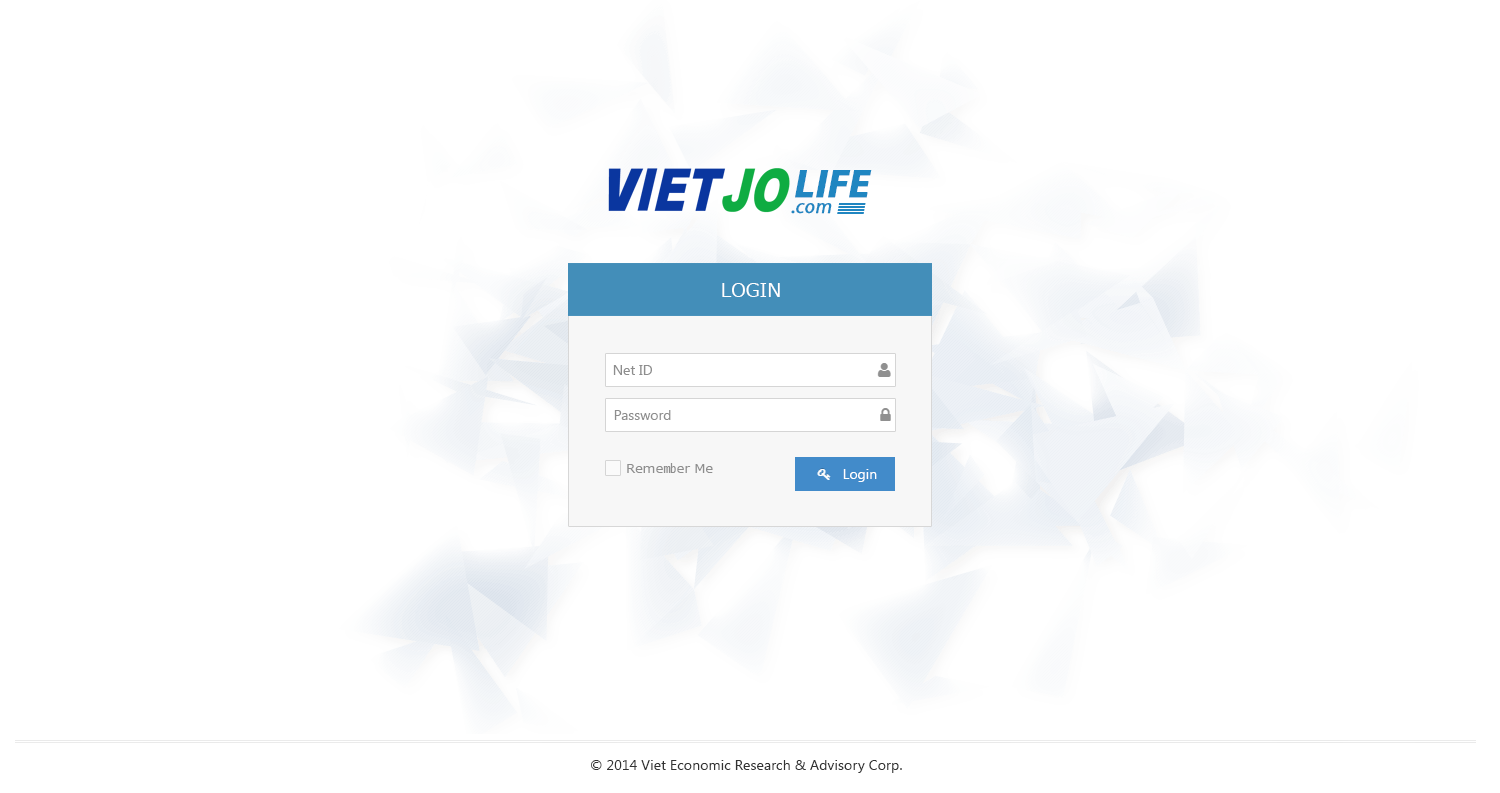
<style>
.page{position:relative;width:1500px;height:793px;background:#ffffff}
.page>*{position:absolute;margin:0}
.t1{font:40px "MyriadPro-BoldIt";color:#2086c1;font-weight:bold}
.t2{font:20px "MyriadPro-It";color:#2086c1;font-weight:bold}
.t3{font:19px "Meiryo";color:#ffffff}
.t4{font:14px "SegoeUI";color:#8e8e8e}
.t5{font:13.3px "Meiryo";color:#8e8e8e}
.t6{font:14px "SegoeUI";color:#ffffff}
.t7{font:14px "SegoeUI";letter-spacing:0.01em;color:#333333}
</style>
<div class="page">
<p class="t1" style="left:795px;top:170px;width:77px;height:28px">LIFE</p>
<p class="t2" style="left:791px;top:203px;width:41px;height:11px">.com</p>
<p class="t3" style="left:722px;top:283px;width:58px;height:14px">LOGIN</p>
<p class="t4" style="left:613px;top:365px;width:39px;height:10px">Net ID</p>
<p class="t4" style="left:614px;top:410px;width:57px;height:10px">Password</p>
<p class="t5" style="left:627px;top:463px;width:86px;height:10px">Remember Me</p>
<p class="t6" style="left:843px;top:469px;width:34px;height:13px">Login</p>
<p class="t7" style="left:591px;top:760px;width:311px;height:13px">© 2014 Viet Economic Research &amp; Advisory Corp.</p>
</div>
